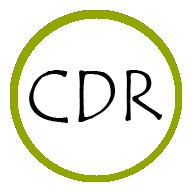
<style>
.page{position:relative;width:192px;height:192px;background:#ffffff}
.page>*{position:absolute;margin:0}
.t1{font:72px "TempusSansITC";color:#010101}
</style>
<div class="page">
<p class="t1" style="left:29px;top:70px;width:133px;height:53px">CDR</p>
</div>
